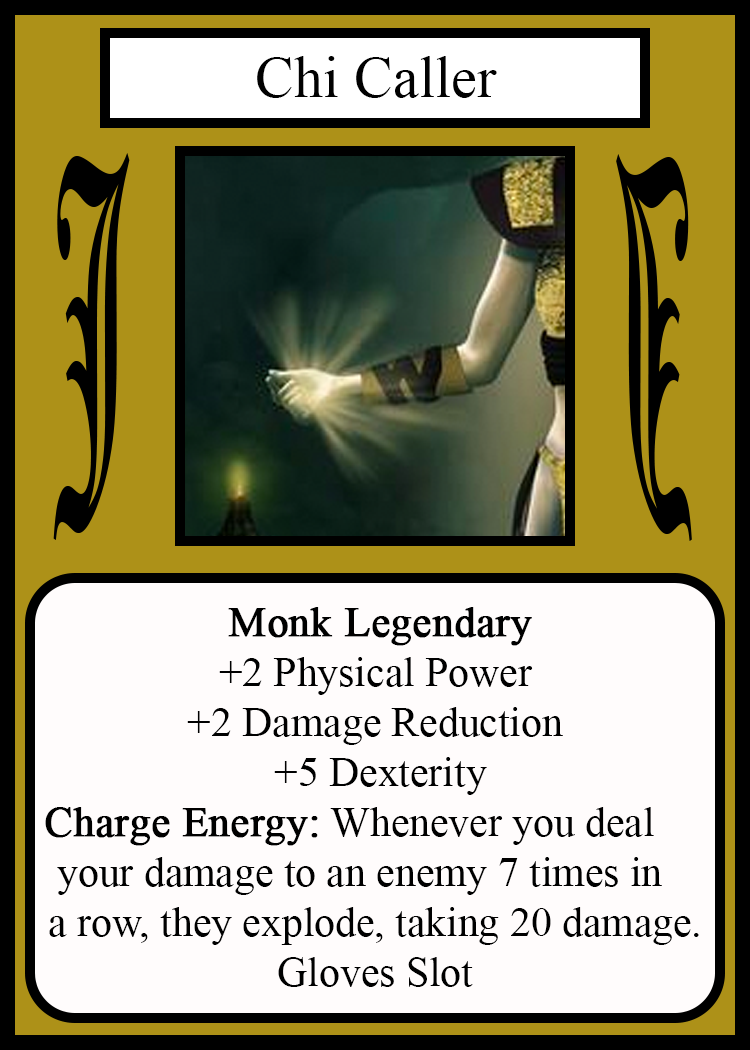
<style>
.page{position:relative;width:750px;height:1050px;background:#fffcfc}
.page>*{position:absolute;margin:0}
.t1{font:58.3px "TimesNewRomanPSMT";color:#010101}
.t2{font:450.1px "OldEnglishTextMT";color:#000000;scale:0.26 1}
.t3{font:449.7px "OldEnglishTextMT";color:#000000;scale:0.26 1}
.t4{font:41.7px "TimesNewRomanPSMT";color:#000000}
.t5{font:41.7px "TimesNewRomanPSMT";color:#000000;font-weight:bold}
</style>
<div class="page">
<p class="t1" style="left:257px;top:56px;width:240px;height:42px">Chi Caller</p>
<p class="t2" style="left:53px;top:153px;width:77px;height:387px">J</p>
<p class="t3" style="left:616px;top:154px;width:76px;height:387px;rotate:180deg">J</p>
<p class="t4" style="left:45px;top:607px;width:654px;height:380px;text-align:center"><span class="t5">Monk Legendary<br></span>+2 Physical Power<br>+2 Damage Reduction<br> +5 Dexterity<br><span class="t5">Charge Energy:</span> Whenever you deal     <br>your damage to an enemy 7 times in   <br>a row, they explode, taking 20 damage.<br> Gloves Slot</p>
</div>
